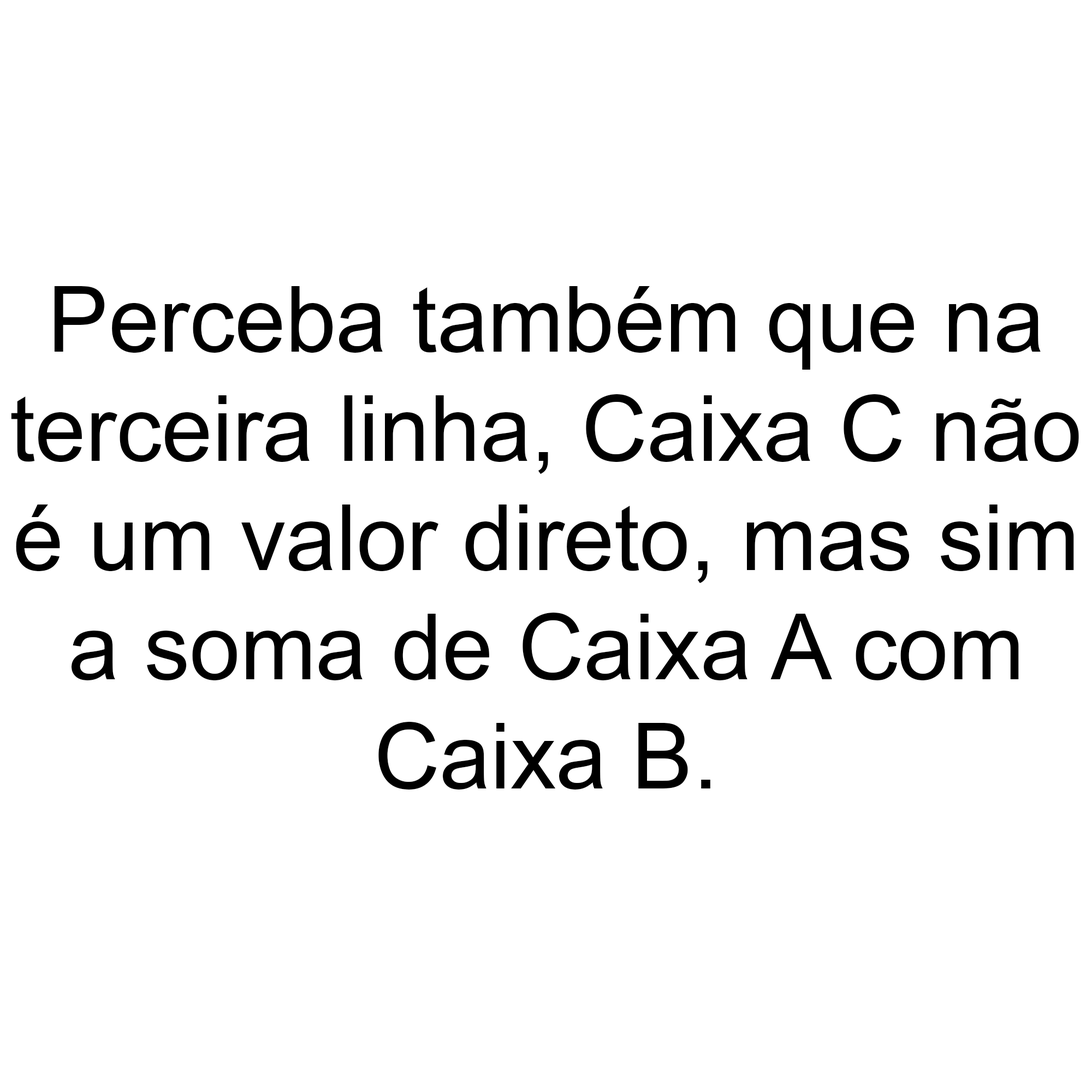
<style>
.page{position:relative;width:1092px;height:1092px;background:#ffffff}
.page>*{position:absolute;margin:0}
.t1{font:91px "ArialMT";color:#000000}
</style>
<div class="page">
<p class="t1" style="left:11px;top:286px;width:1068px;height:504px;text-align:center">Perceba também que na<br>terceira linha, Caixa C não<br>é um valor direto, mas sim<br>a soma de Caixa A com<br>Caixa B.</p>
</div>
